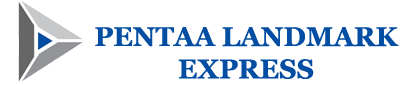
<style>
.page{position:relative;width:400px;height:85px;background:#ffffff}
.page>*{position:absolute;margin:0}
.t1{font:27px "Georgia-Bold";color:#034da2}
</style>
<div class="page">
<p class="t1" style="left:95px;top:27px;width:304px;height:52px;text-align:center">PENTAA LANDMARK<br>EXPRESS</p>
</div>
